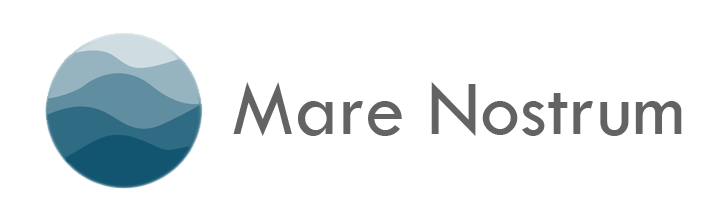
<style>
.page{position:relative;width:725px;height:223px;background:#ffffff}
.page>*{position:absolute;margin:0}
.t1{font:80px "TwCenMT-Regular";color:#636363}
</style>
<div class="page">
<p class="t1" style="left:233px;top:82px;width:449px;height:54px">Mare Nostrum</p>
</div>
